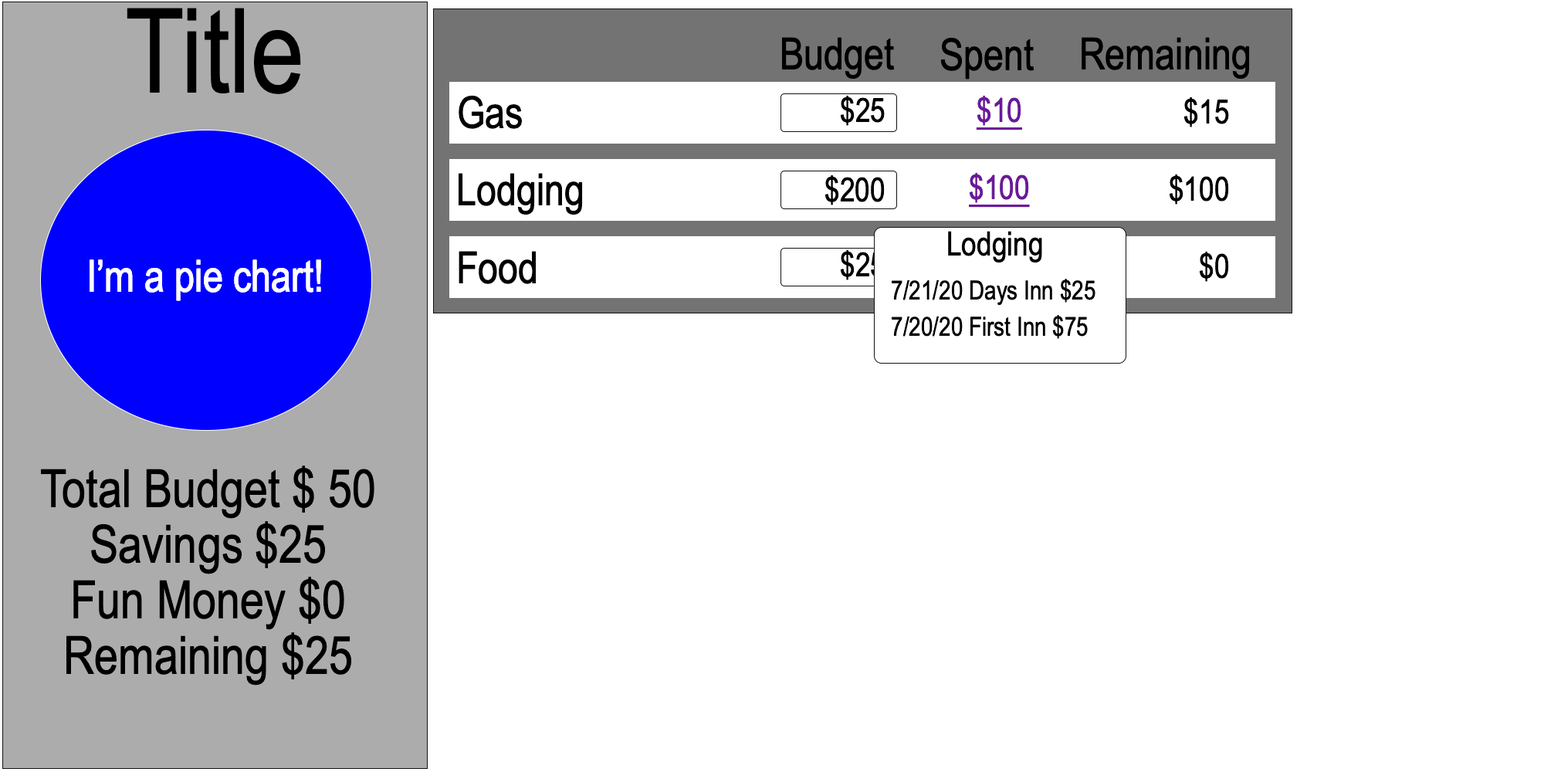
<style>
.page{position:relative;width:1544px;height:772px;background:#ffffff}
.page>*{position:absolute;margin:0}
.t1{font:117.4px "ArialNarrow";color:#000000}
.t2{font:44px "ArialNarrow";color:#000000}
.t3{font:33.2px "ArialNarrow";color:#000000}
.t4{font:33.2px "ArialNarrow";color:#6d189a;text-decoration:underline}
.t5{font:44px "ArialNarrow";color:#ffffff}
.t6{font:26.3px "ArialNarrow";color:#000000}
.t7{font:52.5px/55.6px "ArialNarrow";color:#000000}
</style>
<div class="page">
<p class="t1" style="left:127px;top:8px;width:174px;height:86px">Title</p>
<p class="t2" style="left:782px;top:37px;width:112px;height:42px">Budget</p>
<p class="t2" style="left:940px;top:37px;width:94px;height:43px">Spent</p>
<p class="t2" style="left:1082px;top:37px;width:168px;height:42px">Remaining</p>
<p class="t2" style="left:459px;top:95px;width:63px;height:34px">Gas</p>
<p class="t3" style="left:840px;top:95px;width:45px;height:31px">$25</p>
<p class="t4" style="left:976px;top:95px;width:46px;height:35px">$10</p>
<p class="t3" style="left:1184px;top:97px;width:45px;height:30px">$15</p>
<p class="t2" style="left:459px;top:173px;width:124px;height:42px">Lodging</p>
<p class="t4" style="left:969px;top:172px;width:61px;height:36px">$100</p>
<p class="t3" style="left:1169px;top:174px;width:60px;height:31px">$100</p>
<p class="t3" style="left:825px;top:175px;width:60px;height:30px">$200</p>
<p class="t3" style="left:948px;top:231px;width:94px;height:32px">Lodging</p>
<p class="t2" style="left:459px;top:251px;width:77px;height:33px">Food</p>
<p class="t3" style="left:840px;top:249px;width:45px;height:31px">$25</p>
<p class="t3" style="left:1199px;top:251px;width:30px;height:31px">$0</p>
<p class="t5" style="left:90px;top:259px;width:231px;height:42px">I’m a pie chart!</p>
<p class="t6" style="left:892px;top:279px;width:204px;height:27px">7/21/20 Days Inn $25</p>
<p class="t6" style="left:892px;top:315px;width:196px;height:24px">7/20/20 First Inn $75</p>
<p class="t7" style="left:41px;top:466px;width:333px;height:220px;text-align:center">Total Budget $ 50<br>Savings $25<br>Fun Money $0<br>Remaining $25</p>
</div>
